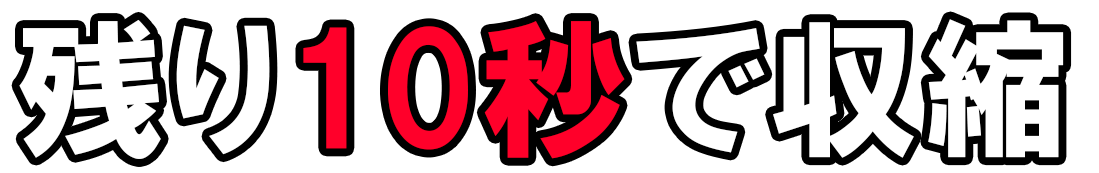
<style>
.page{position:relative;width:1099px;height:173px;background:#ffffff}
.page>*{position:absolute;margin:0}
.t1{font:150px "HGPSoeiKakugothicUB";letter-spacing:0.025em;color:#ff002a}
.t2{font:150px "HGPSoeiKakugothicUB";letter-spacing:0.025em;color:#ffffff}
</style>
<div class="page">
<p class="t1" style="left:19px;top:19px;width:1045px;height:140px"><span class="t2">残り</span>10秒<span class="t2">で収縮</span></p>
</div>
